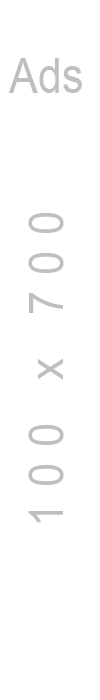
<style>
.page{position:relative;width:100px;height:700px;background:#ffffff}
.page>*{position:absolute;margin:0}
.t1{font:48px "ArialMT";color:#bfbfbf;scale:0.9 1}
.t2{font:48px "ArialMT";letter-spacing:0.365em;color:#bfbfbf;scale:0.9 1}
</style>
<div class="page">
<p class="t1" style="left:8px;top:58px;width:74px;height:35px">Ads</p>
<p class="t2" style="left:28px;top:213px;width:36px;height:310px;rotate:-90deg">100 x 700</p>
</div>
